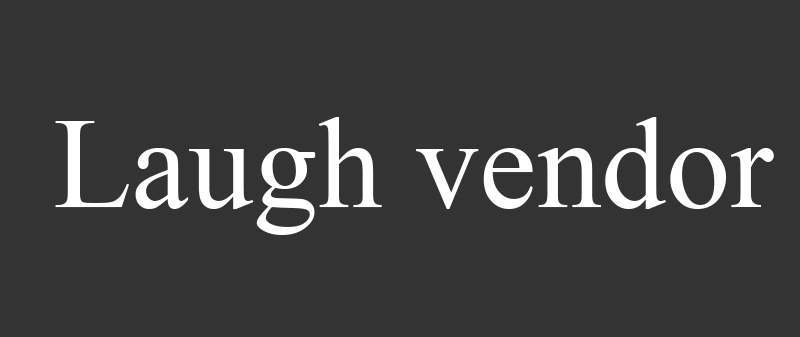
<style>
.page{position:relative;width:800px;height:337px;background:#333333}
.page>*{position:absolute;margin:0}
.t1{font:129.2px "TimesNewRomanPSMT";color:#ffffff}
</style>
<div class="page">
<p class="t1" style="left:55px;top:117px;width:719px;height:118px">Laugh vendor</p>
</div>
